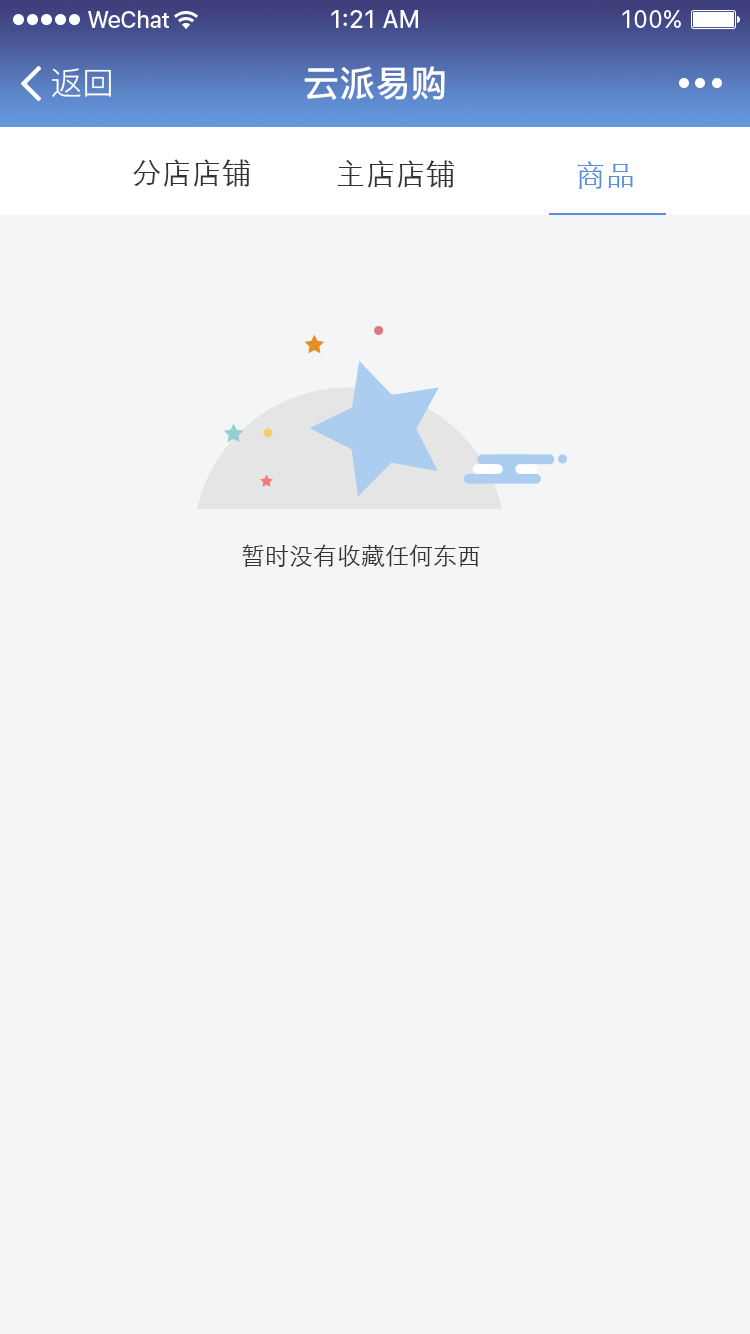
<style>
.page{position:relative;width:750px;height:1334px;background:#f4f5f6}
.page>*{position:absolute;margin:0}
.t1{font:32px "PingFang-SC-Regular";color:#ffffff}
.t2{font:36px "PingFang-SC-Bold";color:#ffffff}
.t3{font:30px "STXihei";color:#333333}
.t4{font:30px "STXihei";color:#568fdc}
.t5{font:24px "STXihei";color:#333333}
</style>
<div class="page">
<p class="t1" style="left:52px;top:68px;width:59px;height:29px">返回</p>
<p class="t2" style="left:304px;top:66px;width:141px;height:34px">云派易购</p>
<p class="t3" style="left:133px;top:159px;width:117px;height:28px">分店店铺</p>
<p class="t3" style="left:337px;top:160px;width:117px;height:28px">主店店铺</p>
<p class="t4" style="left:577px;top:161px;width:56px;height:28px">商品</p>
<p class="t5" style="left:242px;top:544px;width:238px;height:23px">暂时没有收藏任何东西</p>
</div>
